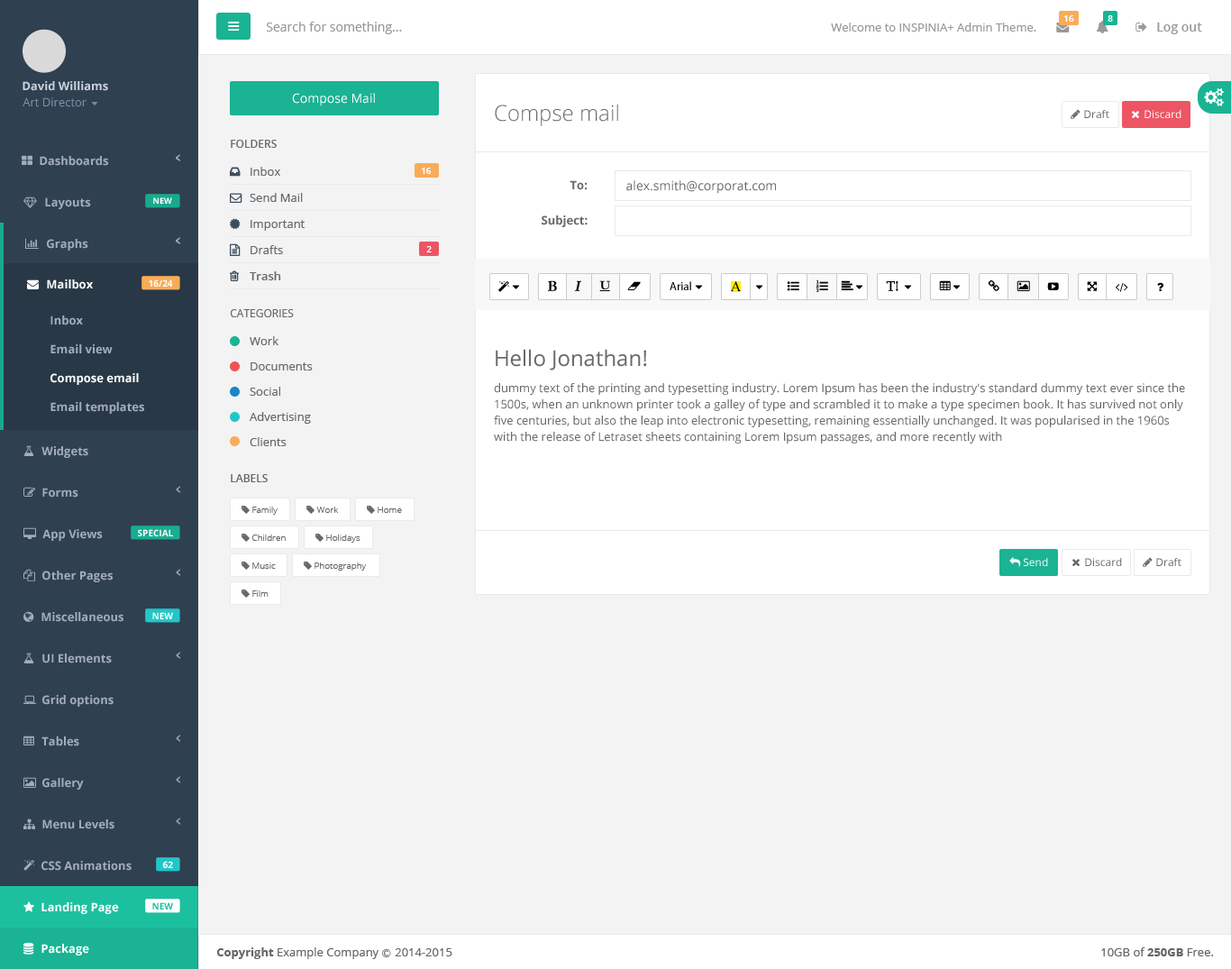
<style>
.page{position:relative;width:1231px;height:969px;background:#f3f3f4}
.page>*{position:absolute;margin:0}
.t1{font:9px "OpenSans-Semibold";color:#ffffff}
.t2{font:12.6px "OpenSans";color:#999999}
.t3{font:11.7px "OpenSans";color:#999999}
.t4{font:12.6px "OpenSans-Semibold";color:#999999}
.t5{font:11.7px "OpenSans-Bold";color:#cad1db}
.t6{font:11.7px "OpenSans";color:#7d93a5}
.t7{font:12.6px "OpenSans";color:#ffffff}
.t8{font:21.6px "OpenSans-Light";color:#676a6c}
.t9{font:10.8px "OpenSans";color:#676a6c}
.t10{font:10.8px "OpenSans";color:#ffffff}
.t11{font:10.8px "OpenSans-Semibold";color:#676a6c}
.t12{font:11.7px "OpenSans-Bold";color:#a2acbd}
.t13{font:11.7px "OpenSans";color:#676a6c}
.t14{font:11.7px "OpenSans-Bold";color:#676a6c}
.t15{font:12.6px "OpenSans";color:#676a6c}
.t16{font:8.1px "OpenSans-Bold";color:#fefefe}
.t17{font:11.7px "OpenSans-Bold";color:#ffffff}
.t18{font:9px "OpenSans-Bold";color:#fefefe}
.t19{font:11.7px "OpenSans-Semibold";color:#676a6c}
.t20{font:11.7px "MyriadPro-Regular";color:#000000}
.t21{font:14.4px "TimesNewRomanPSMT";color:#000000}
.t22{font:11.7px/16.2px "OpenSans";color:#676a6c}
.t23{font:21.6px/16.2px "OpenSans";color:#676a6c}
.t24{font:9px "OpenSans-Light";color:#676a6c}
.t25{font:9px "OpenSans-Bold";color:#1cc09f}
.t26{font:11.7px "OpenSans";color:#666666}
.t27{font:11.7px "OpenSans-Bold";color:#666666}
.t28{font:9px "Meiryo";color:#666666}
</style>
<div class="page">
<p class="t1" style="left:1064px;top:15px;width:10px;height:7px">16</p>
<p class="t1" style="left:1107px;top:15px;width:6px;height:7px">8</p>
<p class="t2" style="left:266px;top:22px;width:136px;height:12px">Search for something...</p>
<p class="t3" style="left:831px;top:23px;width:205px;height:9px">Welcome to INSPINIA+ Admin Theme.</p>
<p class="t4" style="left:1157px;top:23px;width:45px;height:11px">Log out</p>
<p class="t5" style="left:23px;top:81px;width:85px;height:10px">David Williams</p>
<p class="t6" style="left:23px;top:97px;width:64px;height:10px">Art Director</p>
<p class="t7" style="left:292px;top:93px;width:83px;height:13px">Compose Mail</p>
<p class="t8" style="left:495px;top:104px;width:123px;height:22px">Compse mail</p>
<p class="t9" style="left:1084px;top:110px;width:25px;height:8px">Draft</p>
<p class="t10" style="left:1144px;top:110px;width:37px;height:8px">Discard</p>
<p class="t11" style="left:231px;top:140px;width:46px;height:8px">FOLDERS</p>
<p class="t12" style="left:40px;top:156px;width:68px;height:10px">Dashboards</p>
<p class="t13" style="left:251px;top:167px;width:29px;height:9px">Inbox</p>
<p class="t1" style="left:422px;top:168px;width:10px;height:6px">16</p>
<p class="t14" style="left:570px;top:180px;width:18px;height:10px">To:</p>
<p class="t15" style="left:626px;top:180px;width:150px;height:14px">alex.smith@corporat.com</p>
<p class="t12" style="left:45px;top:197px;width:46px;height:12px">Layouts</p>
<p class="t16" style="left:153px;top:197px;width:19px;height:7px">NEW</p>
<p class="t13" style="left:250px;top:193px;width:53px;height:9px">Send Mail</p>
<p class="t13" style="left:251px;top:220px;width:54px;height:11px">Important</p>
<p class="t14" style="left:542px;top:215px;width:46px;height:12px">Subject:</p>
<p class="t12" style="left:47px;top:239px;width:41px;height:12px">Graphs</p>
<p class="t13" style="left:251px;top:245px;width:32px;height:9px">Drafts</p>
<p class="t1" style="left:426px;top:246px;width:6px;height:6px">2</p>
<p class="t17" style="left:47px;top:279px;width:46px;height:10px">Mailbox</p>
<p class="t18" style="left:149px;top:279px;width:24px;height:8px">16/24</p>
<p class="t19" style="left:250px;top:271px;width:31px;height:9px">Trash</p>
<p class="t20" style="left:670px;top:281px;width:21px;height:9px">Arial</p>
<p class="t21" style="left:731px;top:281px;width:10px;height:10px">A</p>
<p class="t12" style="left:50px;top:315px;width:33px;height:10px">Inbox</p>
<p class="t9" style="left:230px;top:309px;width:64px;height:8px">CATEGORIES</p>
<p class="t13" style="left:250px;top:336px;width:28px;height:9px">Work</p>
<p class="t12" style="left:50px;top:344px;width:63px;height:10px">Email view</p>
<p class="t22" style="left:494px;top:349px;width:691px;height:94px"><span class="t23">Hello Jonathan!<br><br></span>dummy text of the printing and typesetting industry. Lorem Ipsum has been the industry's standard dummy text ever since the 1500s, when an unknown printer took a galley of type and scrambled it to make a type specimen book. It has survived not only five centuries, but also the leap into electronic typesetting, remaining essentially unchanged. It was popularised in the 1960s with the release of Letraset sheets containing Lorem Ipsum passages, and more recently with</p>
<p class="t13" style="left:251px;top:362px;width:62px;height:8px">Documents</p>
<p class="t17" style="left:50px;top:373px;width:89px;height:12px">Compose email</p>
<p class="t13" style="left:250px;top:387px;width:30px;height:9px">Social</p>
<p class="t12" style="left:50px;top:402px;width:94px;height:12px">Email templates</p>
<p class="t13" style="left:250px;top:412px;width:61px;height:12px">Advertising</p>
<p class="t13" style="left:250px;top:437px;width:37px;height:9px">Clients</p>
<p class="t12" style="left:41px;top:446px;width:47px;height:12px">Widgets</p>
<p class="t11" style="left:231px;top:474px;width:37px;height:8px">LABELS</p>
<p class="t12" style="left:42px;top:488px;width:36px;height:9px">Forms</p>
<p class="t24" style="left:252px;top:506px;width:26px;height:9px">Family</p>
<p class="t24" style="left:316px;top:506px;width:23px;height:7px">Work</p>
<p class="t24" style="left:378px;top:506px;width:24px;height:7px">Home</p>
<p class="t12" style="left:42px;top:529px;width:61px;height:12px">App Views</p>
<p class="t18" style="left:138px;top:529px;width:35px;height:7px">SPECIAL</p>
<p class="t24" style="left:252px;top:534px;width:34px;height:7px">Children</p>
<p class="t24" style="left:326px;top:534px;width:34px;height:8px">Holidays</p>
<p class="t10" style="left:1023px;top:558px;width:25px;height:8px">Send</p>
<p class="t9" style="left:1085px;top:558px;width:37px;height:8px">Discard</p>
<p class="t9" style="left:1156px;top:558px;width:25px;height:8px">Draft</p>
<p class="t24" style="left:252px;top:562px;width:24px;height:7px">Music</p>
<p class="t24" style="left:314px;top:562px;width:53px;height:8px">Photography</p>
<p class="t12" style="left:42px;top:570px;width:71px;height:12px">Other Pages</p>
<p class="t24" style="left:252px;top:590px;width:17px;height:7px">Film</p>
<p class="t12" style="left:41px;top:612px;width:82px;height:10px">Miscellaneous</p>
<p class="t18" style="left:152px;top:612px;width:21px;height:7px">NEW</p>
<p class="t12" style="left:42px;top:653px;width:70px;height:10px">UI Elements</p>
<p class="t12" style="left:42px;top:695px;width:72px;height:11px">Grid options</p>
<p class="t12" style="left:41px;top:736px;width:38px;height:10px">Tables</p>
<p class="t12" style="left:42px;top:778px;width:42px;height:11px">Gallery</p>
<p class="t12" style="left:42px;top:819px;width:72px;height:10px">Menu Levels</p>
<p class="t12" style="left:41px;top:861px;width:91px;height:9px">CSS Animations</p>
<p class="t18" style="left:162px;top:861px;width:11px;height:7px">62</p>
<p class="t17" style="left:41px;top:902px;width:78px;height:12px">Landing Page</p>
<p class="t25" style="left:152px;top:902px;width:21px;height:7px">NEW</p>
<p class="t17" style="left:41px;top:943px;width:48px;height:12px">Package</p>
<p class="t26" style="left:216px;top:947px;width:236px;height:12px"><span class="t27">Copyright</span> Example Company <span class="t28">Ⓒ </span>2014-2015</p>
<p class="t26" style="left:1101px;top:947px;width:113px;height:9px">10GB of <span class="t27">250GB</span> Free.</p>
</div>
